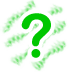
<style>
.page{position:relative;width:72px;height:72px;background:#ffffff}
.page>*{position:absolute;margin:0}
.t1{font:60px "ArialRoundedMTBold";color:#00c800}
</style>
<div class="page">
<p class="t1" style="left:21px;top:13px;width:30px;height:45px">?</p>
</div>
